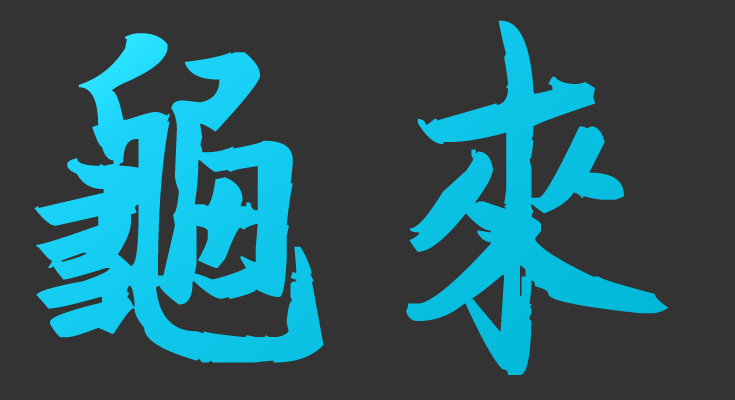
<style>
.page{position:relative;width:735px;height:400px;background:#333333}
.page>*{position:absolute;margin:0}
.t1{font:333.3px "SentyGoldenBell";color:#10c7eb}
</style>
<div class="page">
<p class="t1" style="left:34px;top:20px;width:634px;height:355px">龜來</p>
</div>
